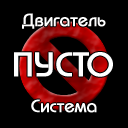
<style>
.page{position:relative;width:128px;height:128px;background:#000000}
.page>*{position:absolute;margin:0}
.t1{font:18px "BauhausC-Medium";color:#ffffff;font-weight:bold}
.t2{font:34px "BauhausC-Medium";color:#ffffff;font-weight:bold}
</style>
<div class="page">
<p class="t1" style="left:22px;top:13px;width:84px;height:16px">Двигатель</p>
<p class="t2" style="left:14px;top:52px;width:99px;height:25px">ПУСТО</p>
<p class="t1" style="left:31px;top:99px;width:66px;height:14px">Система</p>
</div>
